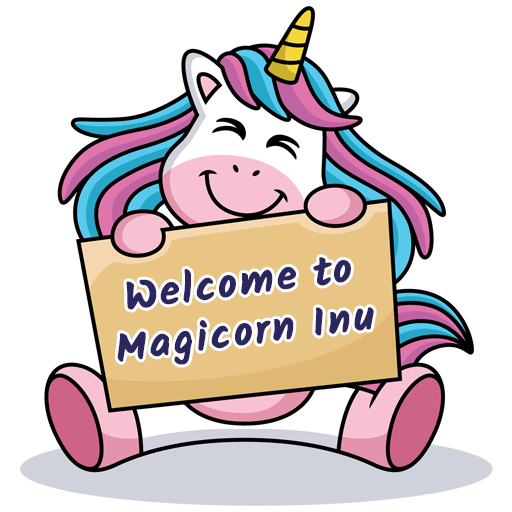
<style>
.page{position:relative;width:512px;height:512px;background:#ffffff}
.page>*{position:absolute;margin:0}
.t1{font:41.7px/50px "Kalam-Bold";letter-spacing:0.05em;color:#2c265e;font-weight:bold}
</style>
<div class="page">
<p class="t1" style="left:117px;top:257px;width:257px;height:108px;text-align:center;rotate:-7deg">Welcome to<br>Magicorn Inu</p>
</div>
